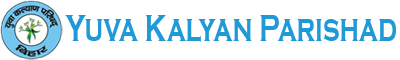
<style>
.page{position:relative;width:400px;height:60px;background:#ffffff}
.page>*{position:absolute;margin:0}
.t1{font:39px "CopperplateGothic-Bold";color:#1f9ad6;scale:0.69 1}
</style>
<div class="page">
<p class="t1" style="left:65px;top:15px;width:331px;height:27px">Yuva Kalyan Parishad</p>
</div>
